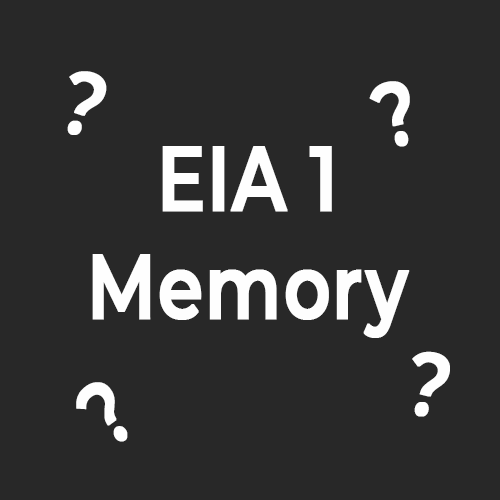
<style>
.page{position:relative;width:500px;height:500px;background:#282828}
.page>*{position:absolute;margin:0}
.t1{font:90.4px "Montserrat-SemiBold";color:#fefefe;font-weight:bold;scale:0.8 1}
</style>
<div class="page">
<p class="t1" style="left:67px;top:71px;width:40px;height:64px;rotate:19deg">?</p>
<p class="t1" style="left:369px;top:81px;width:41px;height:66px;rotate:-14deg">?</p>
<p class="t1" style="left:92px;top:146px;width:318px;height:192px;text-align:center">EIA 1<br>Memory</p>
<p class="t1" style="left:412px;top:351px;width:38px;height:66px;rotate:14deg">?</p>
<p class="t1" style="left:76px;top:382px;width:52px;height:60px;rotate:-36deg">?</p>
</div>
